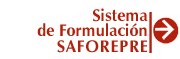
<style>
.page{position:relative;width:180px;height:59px;background:#ffffff}
.page>*{position:absolute;margin:0}
.t1{font:17px/15px "ZapfHumanist601BT-Bold";color:#b2220a;scale:0.95 1}
.t2{font:17px/16px "ZapfHumanist601BT-Bold";letter-spacing:0.05em;color:#b2220a;scale:0.95 1}
</style>
<div class="page">
<p class="t1" style="left:37px;top:8px;width:111px;height:45px;text-align:right">Sistema<br>de Formulación<br><span class="t2">SAFOREPRE</span></p>
</div>
